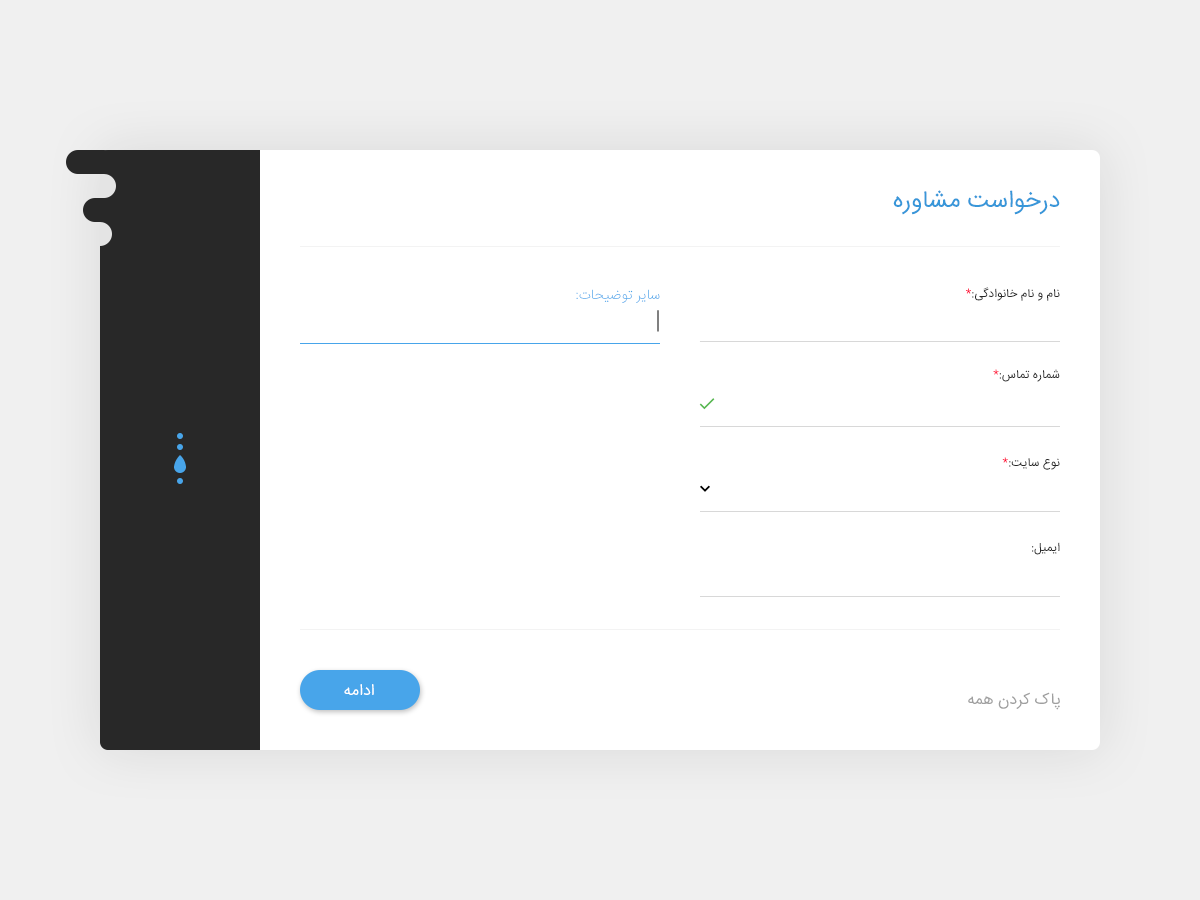
<style>
.page{position:relative;width:1200px;height:900px;background:#ffffff}
.page>*{position:absolute;margin:0}
.t1{font:24px "IRANSans";color:#3897d9}
.t2{font:14px "IRANSans-UltraLight";color:#48a5ea}
.t3{font:12px "IRANSans";color:#282828}
.t4{font:12px "IRANSans";color:#ff0033}
.t5{font:30px "ProximaNovaT-Thin"}
.t6{font:16px "IRANSans";color:#ffffff}
.t7{font:16px "IRANSans";color:#a0a0a0}
</style>
<div class="page">
<p class="t1" style="left:893px;top:190px;width:167px;height:25px">درخواست مشاوره</p>
<p class="t2" style="left:576px;top:289px;width:84px;height:14px">:سایر توضیحات</p>
<p class="t3" style="left:966px;top:287px;width:94px;height:14px">نام و نام خانوادگی:<span class="t4">*</span></p>
<p class="t5" style="left:657px;top:310px;width:2px;height:22px">|</p>
<p class="t3" style="left:993px;top:369px;width:67px;height:13px">شماره تماس:<span class="t4">*</span></p>
<p class="t3" style="left:1002px;top:457px;width:58px;height:13px">نوع سایت:<span class="t4">*</span></p>
<p class="t3" style="left:1032px;top:542px;width:28px;height:13px">ایمیل:</p>
<p class="t6" style="left:344px;top:684px;width:30px;height:11px">ادامه</p>
<p class="t7" style="left:968px;top:692px;width:92px;height:18px">پاک کردن همه</p>
</div>
